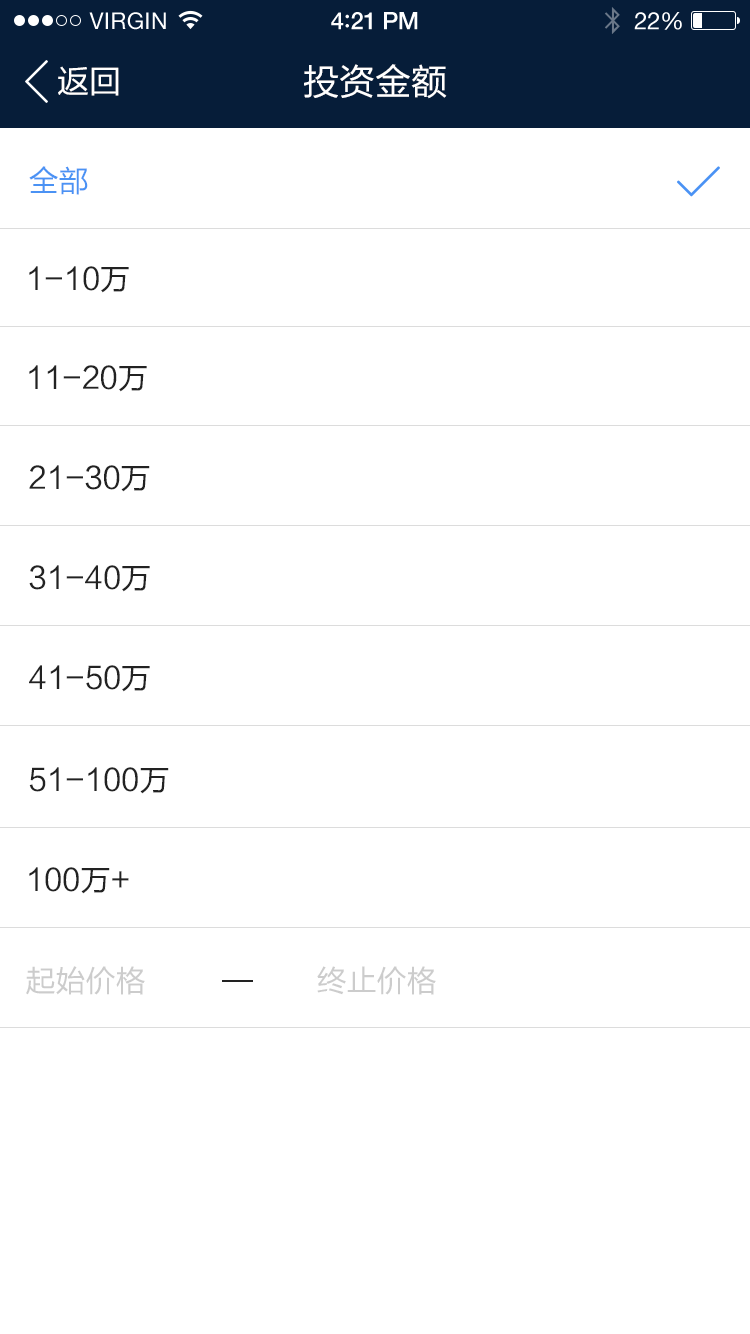
<style>
.page{position:relative;width:750px;height:1334px;background:#ffffff}
.page>*{position:absolute;margin:0}
.t1{font:36px "FZLTHK--GBK1-0";color:#ffffff}
.t2{font:32px "FZLTHK--GBK1-0";color:#ffffff}
.t3{font:30px "FZLTHK--GBK1-0";color:#4a92f4}
.t4{font:30px "FZLTHK--GBK1-0";color:#222222}
.t5{font:30px "FZLTHK--GBK1-0";color:#cccccc}
</style>
<div class="page">
<p class="t1" style="left:304px;top:64px;width:143px;height:35px">投资金额</p>
<p class="t2" style="left:58px;top:66px;width:61px;height:30px">返回</p>
<p class="t3" style="left:29px;top:166px;width:59px;height:29px">全部</p>
<p class="t4" style="left:29px;top:266px;width:100px;height:27px">1-10万</p>
<p class="t4" style="left:29px;top:365px;width:118px;height:27px">11-20万</p>
<p class="t4" style="left:29px;top:465px;width:121px;height:27px">21-30万</p>
<p class="t4" style="left:29px;top:565px;width:121px;height:27px">31-40万</p>
<p class="t4" style="left:29px;top:665px;width:121px;height:27px">41-50万</p>
<p class="t4" style="left:29px;top:767px;width:140px;height:27px">51-100万</p>
<p class="t4" style="left:29px;top:867px;width:100px;height:27px">100万+</p>
<p class="t5" style="left:26px;top:966px;width:119px;height:29px">起始价格</p>
<p class="t5" style="left:317px;top:966px;width:119px;height:29px">终止价格</p>
</div>
